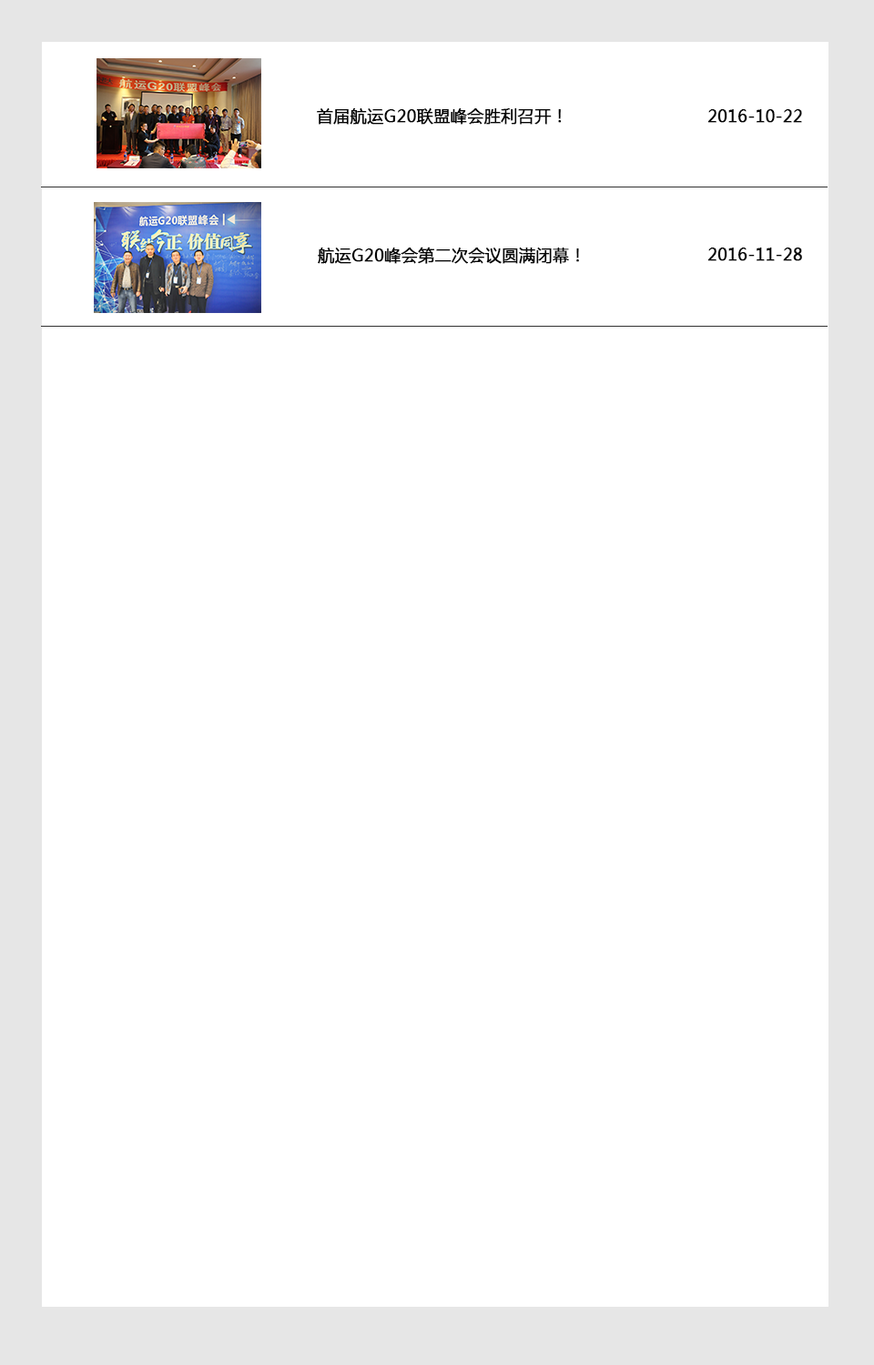
<style>
.page{position:relative;width:874px;height:1365px;background:#ffffff}
.page>*{position:absolute;margin:0}
.t1{font:16.4px "MicrosoftYaHei";color:#040404;font-weight:bold}
</style>
<div class="page">
<p class="t1" style="left:317px;top:108px;width:244px;height:17px">首届航运G20联盟峰会胜利召开！</p>
<p class="t1" style="left:707px;top:109px;width:95px;height:14px">2016-10-22</p>
<p class="t1" style="left:318px;top:247px;width:261px;height:17px">航运G20峰会第二次会议圆满闭幕！</p>
<p class="t1" style="left:707px;top:248px;width:95px;height:13px">2016-11-28</p>
</div>
